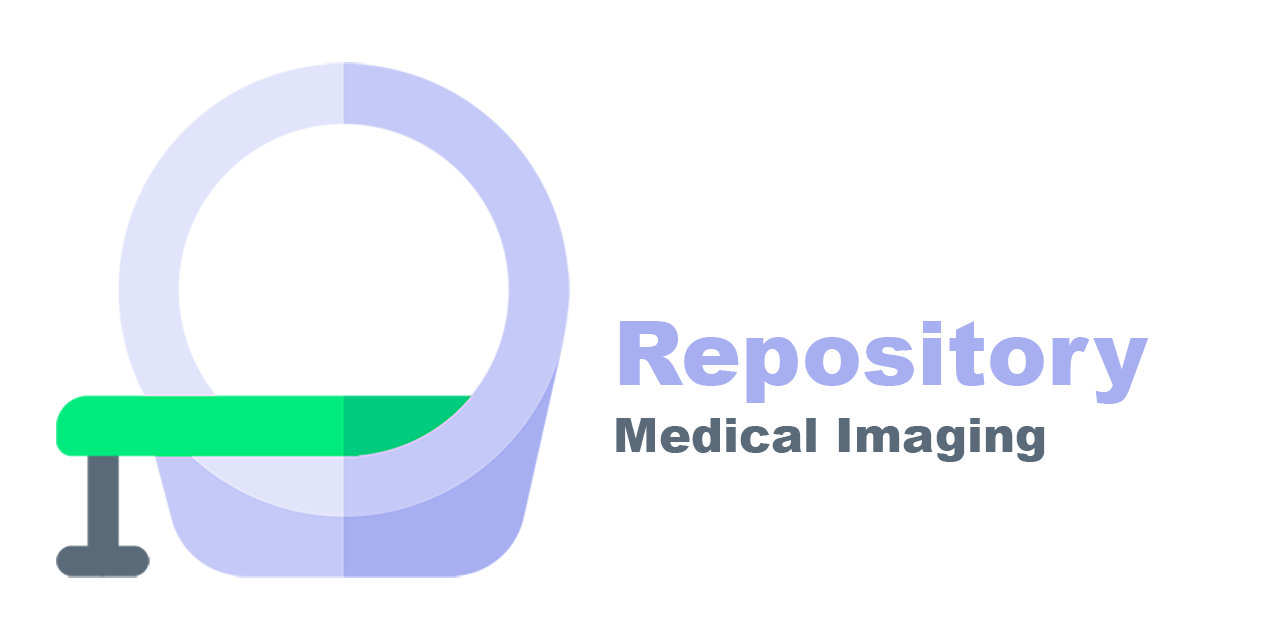
<style>
.page{position:relative;width:1280px;height:640px;background:#ffffff}
.page>*{position:absolute;margin:0}
.t1{font:90.3px "Arial-Black";color:#a8aff1}
.t2{font:48.2px "Arial-Black";color:#5a6a78}
</style>
<div class="page">
<p class="t1" style="left:619px;top:321px;width:530px;height:83px">Repository</p>
<p class="t2" style="left:616px;top:418px;width:429px;height:44px">Medical Imaging</p>
</div>
